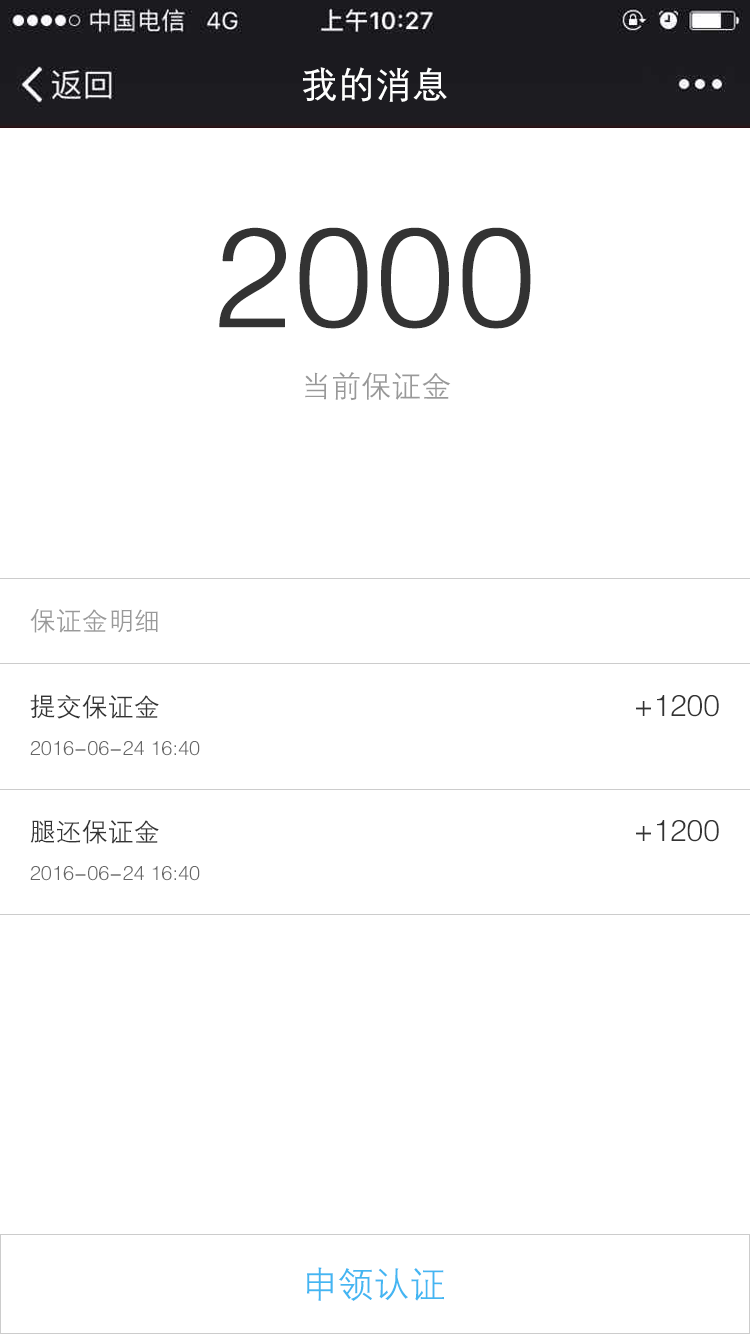
<style>
.page{position:relative;width:750px;height:1334px;background:#ffffff}
.page>*{position:absolute;margin:0}
.t1{font:36px "FZZDXJW--GB1-0";color:#ffffff;font-weight:bold}
.t2{font:140px "FZZDXJW--GB1-0";color:#333333;font-weight:bold}
.t3{font:30px "FZZDXJW--GB1-0";color:#999999}
.t4{font:26px "FZZDXJW--GB1-0";color:#999999}
.t5{font:26px "FZZDXJW--GB1-0";color:#333333}
.t6{font:30px "FZZDXJW--GB1-0";color:#333333}
.t7{font:20px "FZZDXJW--GB1-0";color:#666666}
.t8{font:36px "FZZDXJW--GB1-0";color:#43b6f2}
</style>
<div class="page">
<p class="t1" style="left:303px;top:67px;width:144px;height:35px">我的消息</p>
<p class="t2" style="left:219px;top:227px;width:312px;height:102px">2000</p>
<p class="t3" style="left:305px;top:372px;width:146px;height:29px">当前保证金</p>
<p class="t4" style="left:30px;top:609px;width:128px;height:24px">保证金明细</p>
<p class="t5" style="left:30px;top:694px;width:129px;height:25px">提交保证金</p>
<p class="t6" style="left:636px;top:695px;width:83px;height:22px">+1200</p>
<p class="t7" style="left:30px;top:741px;width:170px;height:15px">2016-06-24 16:40</p>
<p class="t5" style="left:30px;top:820px;width:129px;height:24px">腿还保证金</p>
<p class="t6" style="left:636px;top:820px;width:83px;height:22px">+1200</p>
<p class="t7" style="left:30px;top:866px;width:170px;height:15px">2016-06-24 16:40</p>
<p class="t8" style="left:307px;top:1267px;width:137px;height:34px">申领认证</p>
</div>
